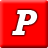
<style>
.page{position:relative;width:48px;height:48px;background:#ff0000}
.page>*{position:absolute;margin:0}
.t1{font:36px "BookmanOldStyle-BoldItalic";color:#ffffff}
</style>
<div class="page">
<p class="t1" style="left:12px;top:10px;width:26px;height:25px">P</p>
</div>
